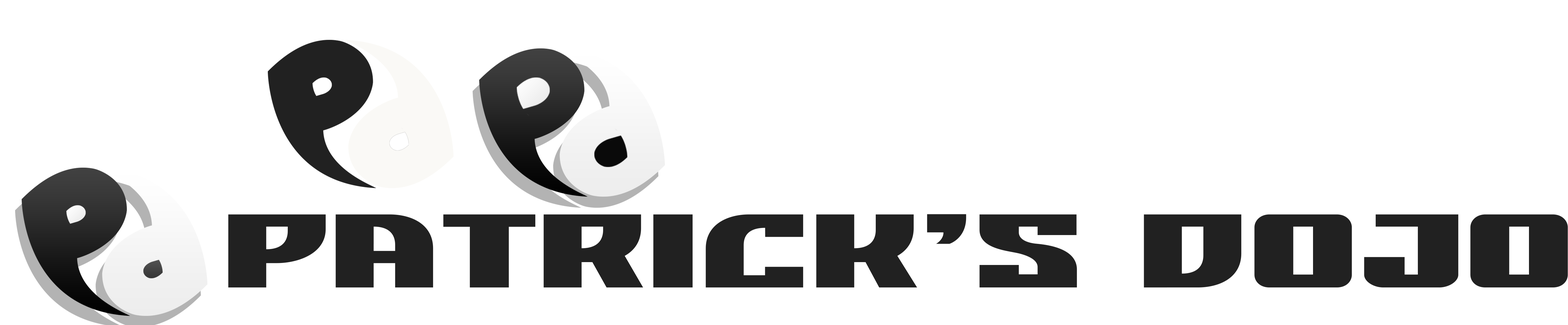
<style>
.page{position:relative;width:1568px;height:325px;background:#ffffff}
.page>*{position:absolute;margin:0}
.t1{font:75.7px "DOJOKICKRegular";color:#1c1c1c;scale:1.33 1}
</style>
<div class="page">
<p class="t1" style="left:228px;top:214px;width:1340px;height:74px">Patrick’s dojo</p>
</div>
